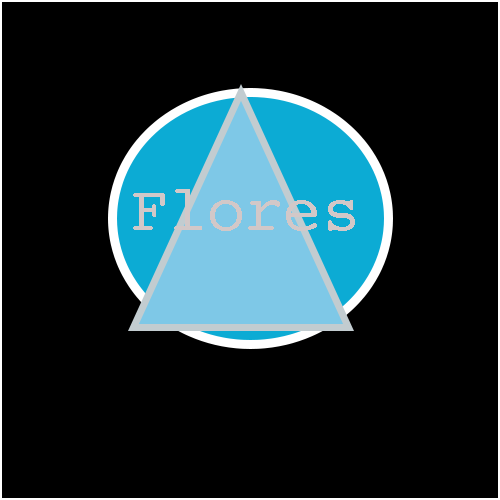
<style>
.page{position:relative;width:500px;height:500px;background:#000000}
.page>*{position:absolute;margin:0}
.t1{font:64px "Courier";color:#d2c8c8}
</style>
<div class="page">
<p class="t1" style="left:133px;top:189px;width:222px;height:42px">Flores</p>
</div>
